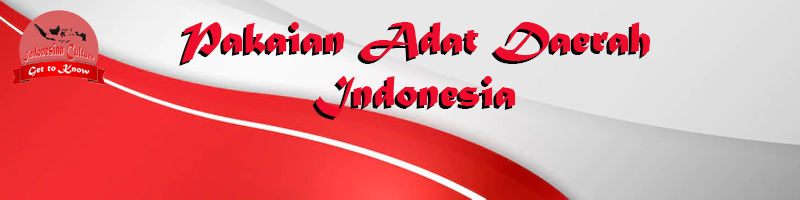
<style>
.page{position:relative;width:800px;height:200px}
.page>*{position:absolute;margin:0}
.t1{font:45px "MaturaMTScriptCapitals"}
.t2{font:45px "MaturaMTScriptCapitals";color:#ee0d2d}
</style>
<div class="page">
<p class="t1" style="left:179px;top:25px;width:469px;height:95px;text-align:center">Pakaian Adat Daerah<br>Indonesia</p>
<p class="t2" style="left:182px;top:22px;width:469px;height:95px;text-align:center">Pakaian Adat Daerah<br>Indonesia</p>
<p class="t1" style="left:193px;top:22px;width:447px;height:95px;text-align:center">Rumah Adat Daerah<br>Indonesia</p>
</div>
